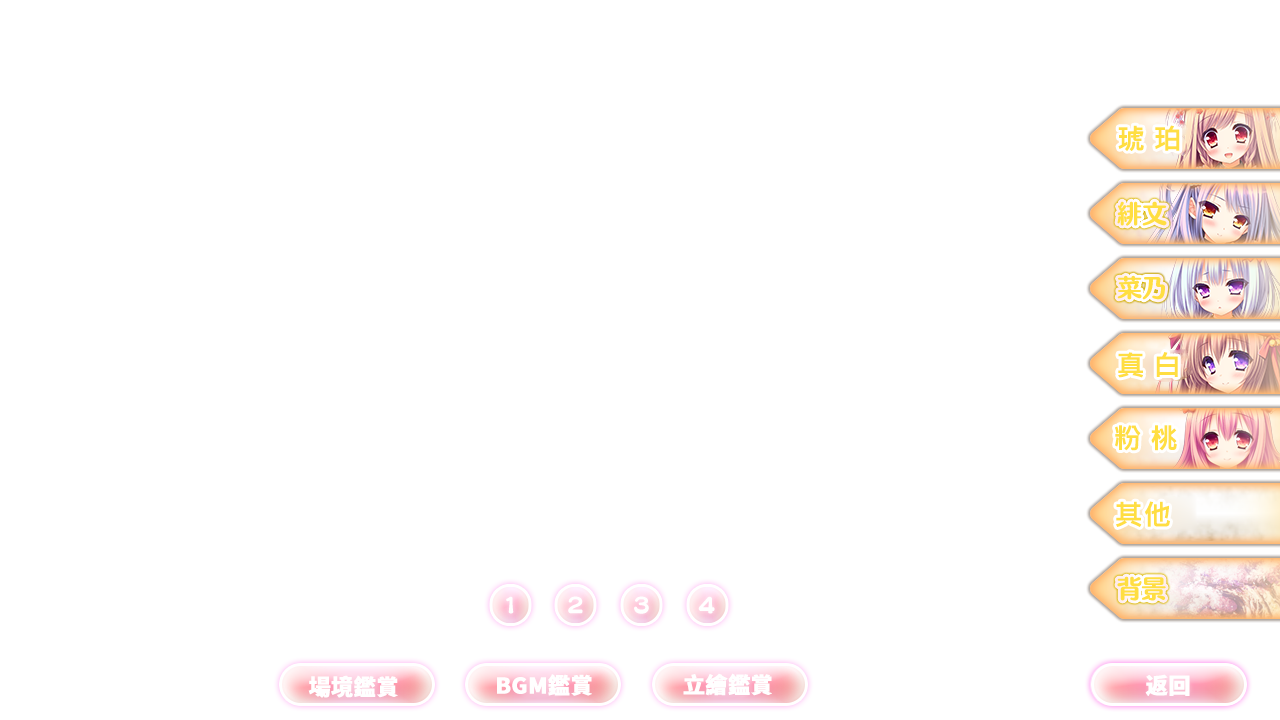
<style>
.page{position:relative;width:1280px;height:720px;background:#ffffff}
.page>*{position:absolute;margin:0}
.t1{font:28px "MicrosoftJhengHeiBold";color:#ffde42;font-weight:bold}
.t2{font:22px "SourceHanSansCN-Heavy";color:#ffffff;font-weight:bold}
</style>
<div class="page">
<p class="t1" style="left:1118px;top:125px;width:62px;height:26px">琥 珀</p>
<p class="t1" style="left:1118px;top:352px;width:60px;height:26px">真 白</p>
<p class="t1" style="left:1115px;top:425px;width:62px;height:26px">粉 桃</p>
<p class="t1" style="left:1116px;top:501px;width:54px;height:26px">其他</p>
<p class="t2" style="left:308px;top:675px;width:90px;height:23px">場境鑑賞</p>
<p class="t2" style="left:497px;top:674px;width:95px;height:22px">BGM鑑賞</p>
<p class="t2" style="left:683px;top:673px;width:89px;height:23px">立繪鑑賞</p>
<p class="t2" style="left:1145px;top:674px;width:45px;height:22px">返回</p>
</div>
